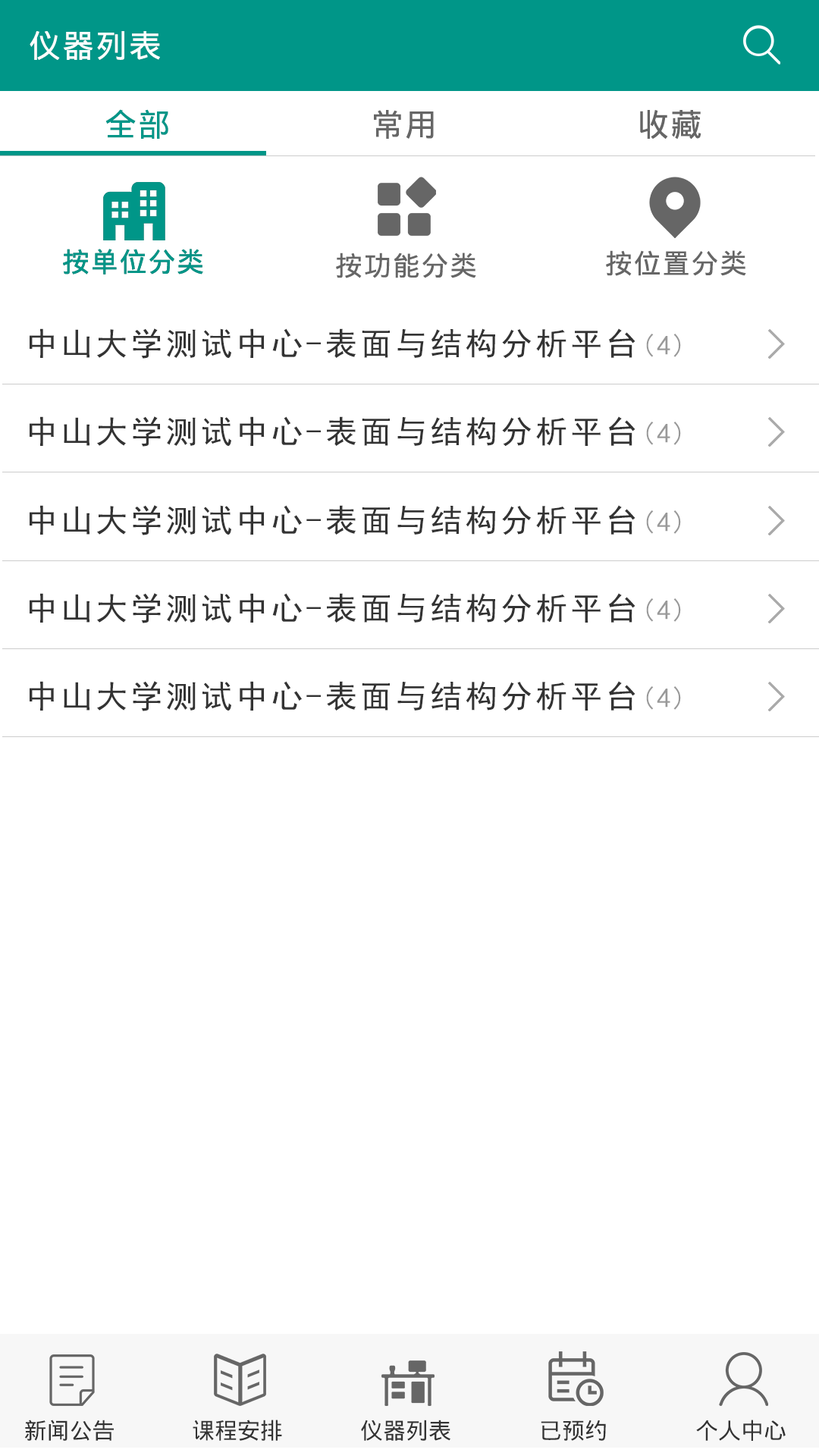
<style>
.page{position:relative;width:819px;height:1456px;background:#ffffff}
.page>*{position:absolute;margin:0}
.t1{font:31.8px "DroidSansFallback";letter-spacing:0.05em;color:#ffffff}
.t2{font:31.8px "DroidSansFallback";letter-spacing:0.05em;color:#009688}
.t3{font:31.8px "DroidSansFallback";letter-spacing:0.05em;color:#666666}
.t4{font:27.3px "DroidSansFallback";letter-spacing:0.05em;color:#009688}
.t5{font:27.3px "DroidSansFallback";letter-spacing:0.05em;color:#666666}
.t6{font:31.8px "SimHei";letter-spacing:0.1em;color:#333333}
.t7{font:27.3px "SimHei";letter-spacing:0.1em;color:#999999}
.t8{font:22.7px "DroidSansFallback";color:#333333}
</style>
<div class="page">
<p class="t1" style="left:30px;top:31px;width:130px;height:29px">仪器列表</p>
<p class="t2" style="left:105px;top:109px;width:63px;height:30px">全部</p>
<p class="t3" style="left:374px;top:110px;width:60px;height:29px">常用</p>
<p class="t3" style="left:640px;top:110px;width:61px;height:30px">收藏</p>
<p class="t4" style="left:63px;top:249px;width:140px;height:26px">按单位分类</p>
<p class="t4" style="left:63px;top:249px;width:140px;height:26px">按单位分类</p>
<p class="t5" style="left:336px;top:253px;width:140px;height:25px">按功能分类</p>
<p class="t5" style="left:606px;top:250px;width:140px;height:26px">按位置分类</p>
<p class="t6" style="left:30px;top:328px;width:651px;height:31px">中山大学测试中心-表面与结构分析平台<span class="t7">(4)</span></p>
<p class="t6" style="left:30px;top:416px;width:651px;height:31px">中山大学测试中心-表面与结构分析平台<span class="t7">(4)</span></p>
<p class="t6" style="left:30px;top:505px;width:651px;height:30px">中山大学测试中心-表面与结构分析平台<span class="t7">(4)</span></p>
<p class="t6" style="left:30px;top:593px;width:651px;height:30px">中山大学测试中心-表面与结构分析平台<span class="t7">(4)</span></p>
<p class="t6" style="left:30px;top:681px;width:651px;height:30px">中山大学测试中心-表面与结构分析平台<span class="t7">(4)</span></p>
<p class="t8" style="left:24px;top:1420px;width:90px;height:21px">新闻公告</p>
<p class="t8" style="left:193px;top:1420px;width:89px;height:21px">课程安排</p>
<p class="t8" style="left:361px;top:1420px;width:89px;height:21px">仪器列表</p>
<p class="t8" style="left:541px;top:1420px;width:65px;height:21px">已预约</p>
<p class="t8" style="left:696px;top:1420px;width:90px;height:21px">个人中心</p>
</div>
